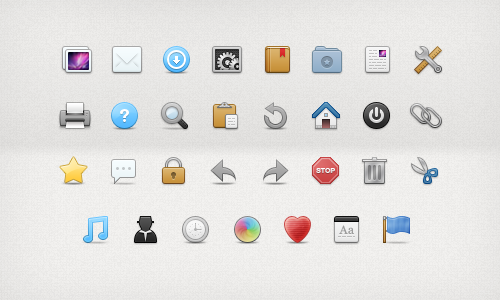
<style>
.page{position:relative;width:500px;height:300px}
.page>*{position:absolute;margin:0}
.t1{font:6.5px "HelveticaNeue-Bold";color:#fefefe;text-transform:uppercase;scale:1.08 1}
.t2{font:11.9px "Georgia";color:#9b9b9b}
</style>
<div class="page">
<p class="t1" style="left:316px;top:168px;width:19px;height:5px">Stop</p>
<p class="t2" style="left:339px;top:225px;width:9px;height:9px">A</p>
<p class="t2" style="left:348px;top:227px;width:6px;height:7px">a</p>
</div>
